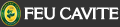
<style>
.page{position:relative;width:120px;height:27px;background:#333333}
.page>*{position:absolute;margin:0}
.t1{font:16.1px "DellaRobbiaBT-Bold";letter-spacing:-0.04em;color:#ffffff;text-transform:uppercase;font-weight:bold}
</style>
<div class="page">
<p class="t1" style="left:24px;top:7px;width:95px;height:13px">feu cavite</p>
</div>
